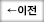
<style>
.page{position:relative;width:44px;height:22px;background:#ffffff}
.page>*{position:absolute;margin:0}
.t1{font:10px "YoonGothicPro770";color:#000000}
</style>
<div class="page">
<p class="t1" style="left:7px;top:5px;width:30px;height:11px">←이전</p>
</div>
